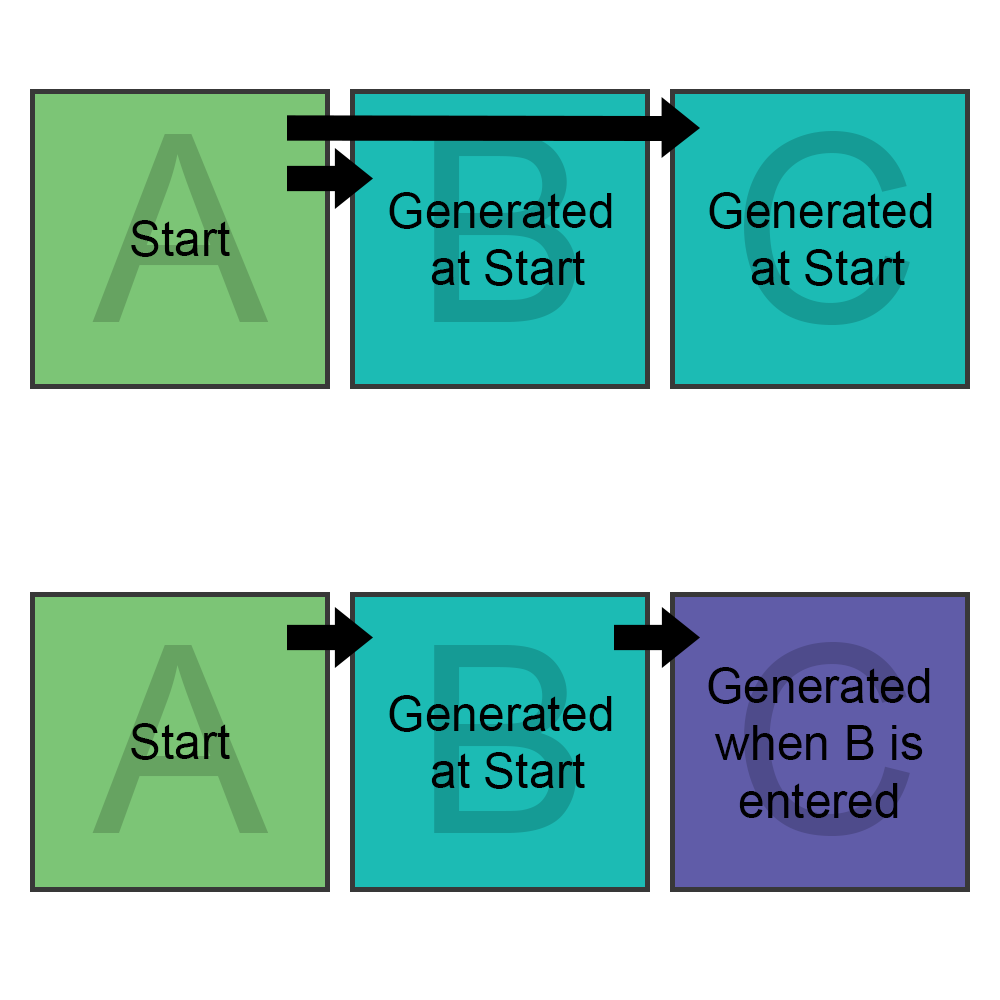
<style>
.page{position:relative;width:1000px;height:1000px;background:#ffffff}
.page>*{position:absolute;margin:0}
.t1{font:262px "ArialMT";color:#66a361}
.t2{font:48px "ArialMT";color:#000000}
</style>
<div class="page">
<p class="t1" style="left:92px;top:134px;width:177px;height:188px">A</p>
<p class="t2" style="left:389px;top:192px;width:223px;height:94px;text-align:center">Generated <br>at Start</p>
<p class="t2" style="left:709px;top:192px;width:223px;height:94px;text-align:center">Generated <br>at Start</p>
<p class="t2" style="left:131px;top:220px;width:99px;height:37px">Start</p>
<p class="t1" style="left:92px;top:645px;width:177px;height:188px">A</p>
<p class="t2" style="left:708px;top:667px;width:222px;height:151px;text-align:center">Generated<br>when B is<br>entered</p>
<p class="t2" style="left:389px;top:695px;width:223px;height:94px;text-align:center">Generated <br>at Start</p>
<p class="t2" style="left:131px;top:723px;width:99px;height:37px">Start</p>
</div>
